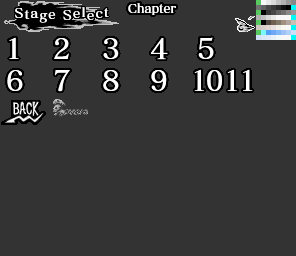
<style>
.page{position:relative;width:296px;height:256px;background:#333333}
.page>*{position:absolute;margin:0}
.t1{font:12px "MatisseVPro-DB";color:#ffffff}
.t2{font:13px "MatisseVPro-DB";letter-spacing:0.1em;color:#ffffff}
.t3{font:28px "MatisseVPro-DB";color:#ffffff}
.t4{font:28px "MatisseVPro-DB";letter-spacing:-0.1em;color:#ffffff}
</style>
<div class="page">
<p class="t1" style="left:128px;top:3px;width:48px;height:12px">Chapter</p>
<p class="t2" style="left:15px;top:7px;width:94px;height:16px">Stage Select</p>
<p class="t3" style="left:9px;top:37px;width:10px;height:22px">1</p>
<p class="t3" style="left:54px;top:38px;width:15px;height:21px">2</p>
<p class="t3" style="left:103px;top:38px;width:16px;height:21px">3</p>
<p class="t3" style="left:151px;top:38px;width:17px;height:22px">4</p>
<p class="t3" style="left:198px;top:37px;width:16px;height:22px">5</p>
<p class="t3" style="left:7px;top:70px;width:16px;height:21px">6</p>
<p class="t3" style="left:54px;top:70px;width:16px;height:22px">7</p>
<p class="t3" style="left:103px;top:70px;width:16px;height:21px">8</p>
<p class="t3" style="left:151px;top:70px;width:16px;height:21px">9</p>
<p class="t4" style="left:194px;top:69px;width:28px;height:22px">1<span class="t3">0</span></p>
<p class="t4" style="left:227px;top:69px;width:26px;height:22px">1<span class="t3">1</span></p>
</div>
